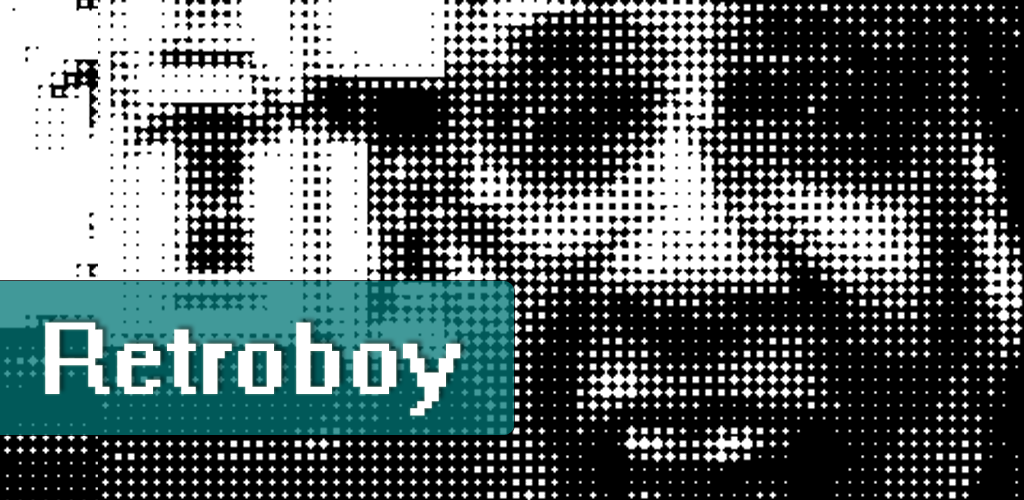
<style>
.page{position:relative;width:1024px;height:500px;background:#000000}
.page>*{position:absolute;margin:0}
.t1{font:91.7px "System";color:#ffffff}
</style>
<div class="page">
<p class="t1" style="left:45px;top:322px;width:416px;height:94px">Retroboy</p>
</div>
